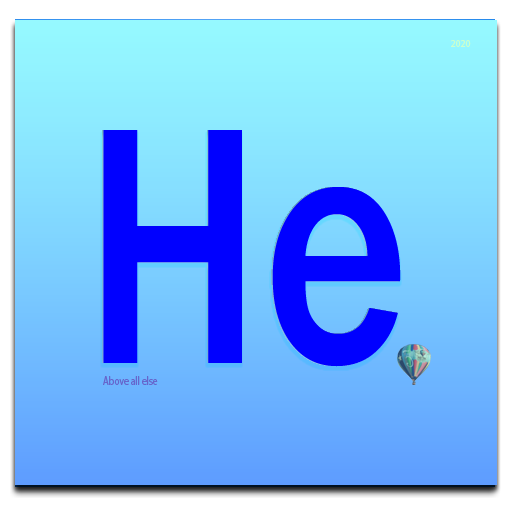
<style>
.page{position:relative;width:512px;height:512px}
.page>*{position:absolute;margin:0}
.t1{font:10px "MyriadPro-Regular";color:#ccffcc;scale:0.96 1}
.t2{font:350px "FranklinGothic-Medium";color:#0000ff;scale:0.8 1}
.t3{font:12px "MyriadPro-Regular";color:#6666cc;scale:0.8 1}
</style>
<div class="page">
<p class="t1" style="left:451px;top:40px;width:20px;height:7px">2020</p>
<p class="t2" style="left:103px;top:130px;width:298px;height:237px">He</p>
<p class="t3" style="left:103px;top:376px;width:55px;height:9px">Above all else</p>
</div>
